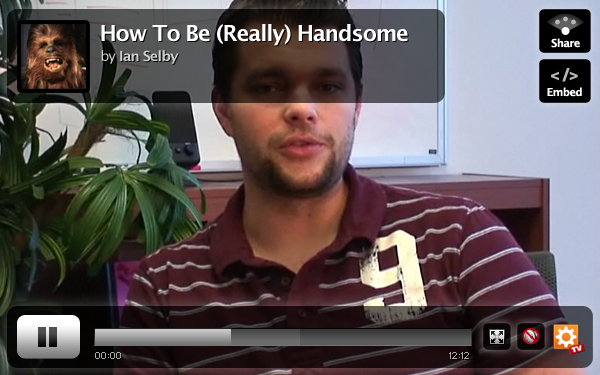
<style>
.page{position:relative;width:600px;height:375px}
.page>*{position:absolute;margin:0}
.t1{font:22px "LucidaSans-Demi";letter-spacing:-0.05em;color:#ffffff}
.t2{font:11px "LucidaSans-Demi";letter-spacing:-0.05em;color:#ffffff}
.t3{font:14px "LucidaSans-Demi";letter-spacing:-0.05em;color:#d2d2d2}
.t4{font:14px "LucidaSans";letter-spacing:-0.05em;color:#d2d2d2}
.t5{font:18px "BlissExtraBold";letter-spacing:-0.05em;color:#b7b7ba}
.t6{font:8px "Standard0755";color:#ababab}
</style>
<div class="page">
<p class="t1" style="left:101px;top:24px;width:307px;height:22px">How To Be (Really) Handsome</p>
<p class="t2" style="left:551px;top:38px;width:29px;height:10px">Share</p>
<p class="t3" style="left:101px;top:50px;width:78px;height:14px"><span class="t4">by</span> Ian Selby</p>
<p class="t5" style="left:551px;top:68px;width:27px;height:14px">&lt; /&gt;</p>
<p class="t2" style="left:547px;top:87px;width:35px;height:10px">Embed</p>
<p class="t6" style="left:95px;top:352px;width:26px;height:7px">00:00</p>
<p class="t6" style="left:449px;top:352px;width:20px;height:7px">12:12</p>
</div>
